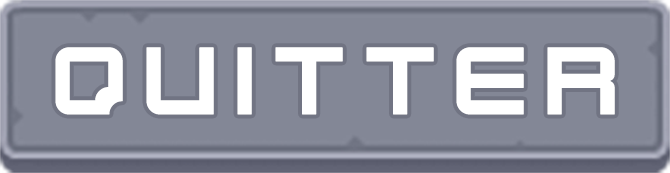
<style>
.page{position:relative;width:670px;height:173px;background:#838796}
.page>*{position:absolute;margin:0}
.t1{font:105.9px "KenVector-Future";color:#ffffff;font-weight:bold}
</style>
<div class="page">
<p class="t1" style="left:55px;top:47px;width:560px;height:68px">Quitter</p>
</div>
